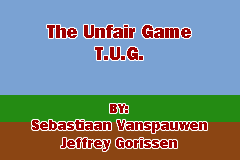
<style>
.page{position:relative;width:240px;height:160px;background:#7aa2d3}
.page>*{position:absolute;margin:0}
.t1{font:14.6px "FranklinGothic-Heavy";color:#9e0000}
.t2{font:18.8px "FranklinGothic-Heavy";color:#9e0000}
.t3{font:12.5px "FranklinGothic-Heavy";color:#9e0000}
</style>
<div class="page">
<p class="t1" style="left:32px;top:25px;width:175px;height:126px;text-align:center"><span class="t2">The Unfair Game<br>T.U.G.<br><br></span><span class="t3"><br>BY:<br></span>Sebastiaan Vanspauwen<br>Jeffrey Gorissen</p>
</div>
